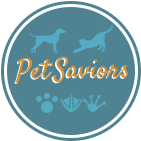
<style>
.page{position:relative;width:141px;height:141px;background:#4f8391}
.page>*{position:absolute;margin:0}
.t1{font:27.3px "Satisfy"}
.t2{font:27.3px "Satisfy";color:#d79230}
.t3{font:27.3px "Satisfy";color:#d79331}
</style>
<div class="page">
<p class="t1" style="left:14px;top:59px;width:38px;height:25px">Pet</p>
<p class="t2" style="left:15px;top:58px;width:39px;height:25px">Pet</p>
<p class="t1" style="left:51px;top:57px;width:76px;height:27px">Saviors</p>
<p class="t3" style="left:53px;top:56px;width:75px;height:27px">Saviors</p>
</div>
